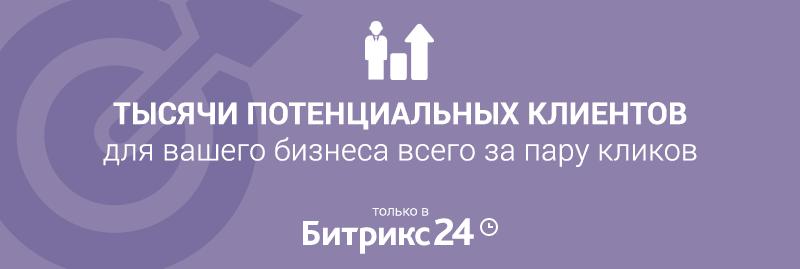
<style>
.page{position:relative;width:800px;height:269px;background:#8d81ac}
.page>*{position:absolute;margin:0}
.t1{font:30.3px "Roboto-Light";letter-spacing:0.01em;color:#ffffff}
.t2{font:30.3px "Roboto-Bold";letter-spacing:0.01em;color:#ffffff}
.t3{font:14px "Roboto-Light";letter-spacing:0.01em;color:#ffffff}
</style>
<div class="page">
<p class="t1" style="left:103px;top:102px;width:594px;height:65px;text-align:center"><span class="t2">ТЫСЯЧИ ПОТЕНЦИАЛЬНЫХ КЛИЕНТОВ</span><br>для вашего бизнеса всего за пару кликов</p>
<p class="t3" style="left:372px;top:208px;width:57px;height:8px">только в</p>
</div>
